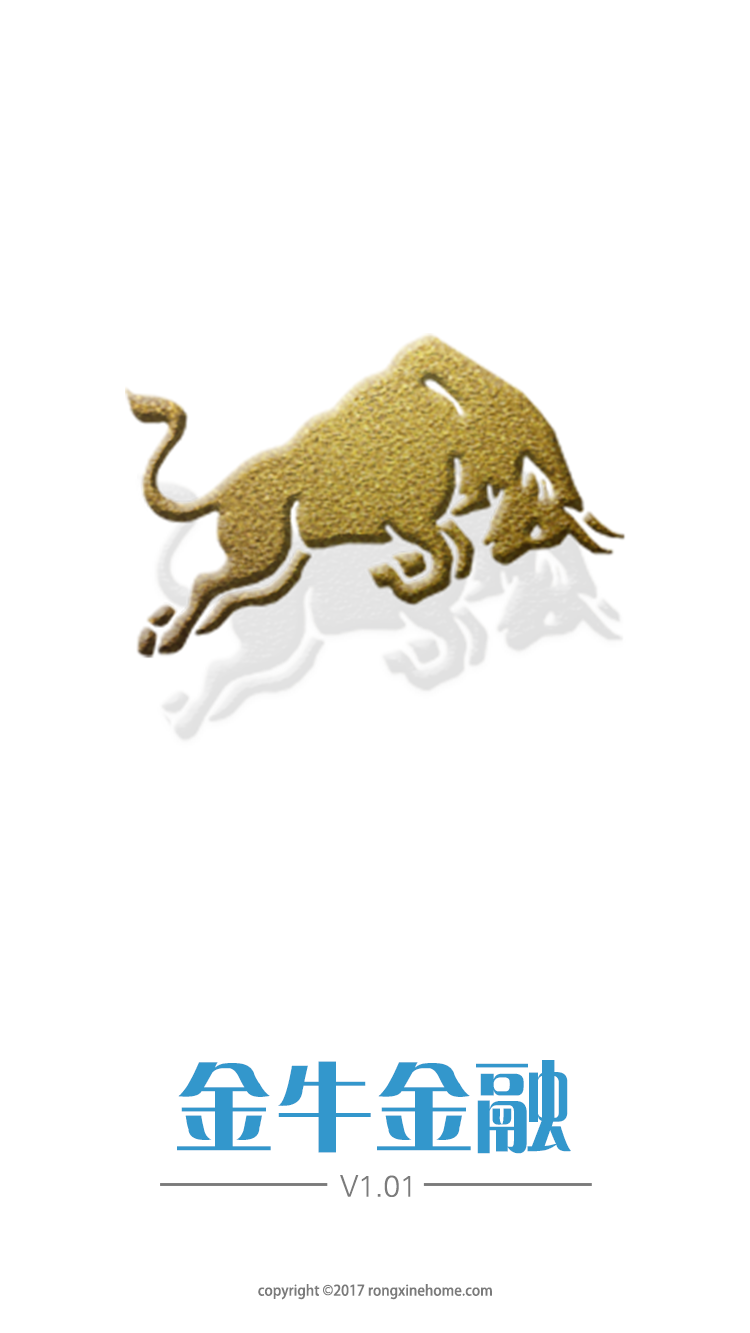
<style>
.page{position:relative;width:750px;height:1333px;background:#ffffff}
.page>*{position:absolute;margin:0}
.t1{font:100px "GJJCQJW--GB1-0";color:#3397cc}
.t2{font:29.9px "FZY1JW--GB1-0";color:#7b7b7b}
.t3{font:14.5px "AdobeHeitiStd-Regular";color:#7a7a7a;scale:0.96 1}
</style>
<div class="page">
<p class="t1" style="left:177px;top:1060px;width:394px;height:94px">金牛金融</p>
<p class="t2" style="left:340px;top:1175px;width:71px;height:22px">V1.01</p>
<p class="t3" style="left:258px;top:1284px;width:234px;height:16px">copyright ©2017 rongxinehome.com</p>
</div>
